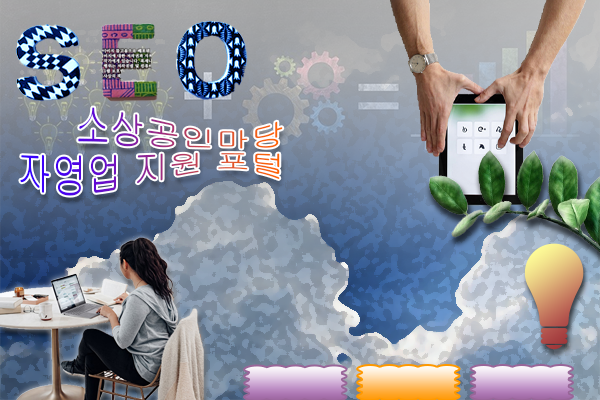
<style>
.page{position:relative;width:600px;height:400px}
.page>*{position:absolute;margin:0}
.t1{font:35px/36px "Gulim"}
</style>
<div class="page">
<p class="t1" style="left:20px;top:107px;width:263px;height:89px;text-align:right">소상공인마당<br>자영업 지원 포털</p>
</div>
